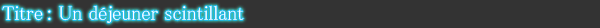
<style>
.page{position:relative;width:600px;height:28px;background:#333333}
.page>*{position:absolute;margin:0}
.t1{font:20px "MS-PMincho";color:#ffffff}
</style>
<div class="page">
<p class="t1" style="left:2px;top:5px;width:242px;height:18px">Titre : Un déjeuner scintillant</p>
</div>
